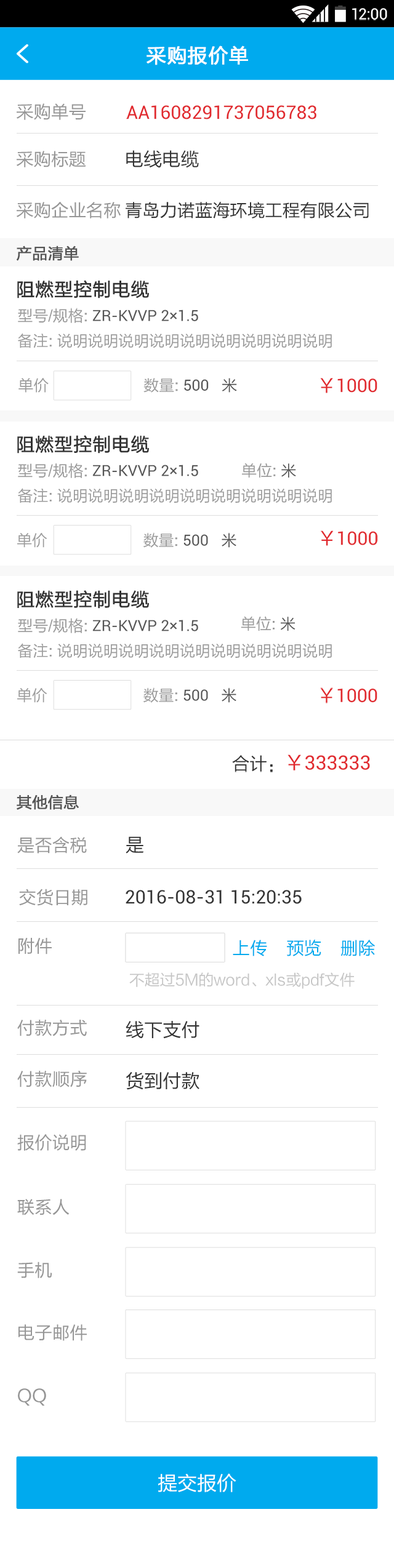
<style>
.page{position:relative;width:394px;height:1568px;background:#ffffff}
.page>*{position:absolute;margin:0}
.t1{font:15.3px "Roboto-Regular";color:#ffffff}
.t2{font:19.7px "FZLTHJW--GB1-0";letter-spacing:0.02em;color:#ffffff;font-weight:bold}
.t3{font:17.5px "FZLTHJW--GB1-0";color:#969696}
.t4{font:18.6px "Roboto-Regular";color:#e1292e}
.t5{font:18.6px "FZLTHK--GBK1-0";color:#333333}
.t6{font:17.5px "FZLTHK--GBK1-0";color:#333333}
.t7{font:15.3px "FZLTHJW--GB1-0";color:#555555;font-weight:bold}
.t8{font:18.6px "FZLTHJW--GB1-0";color:#333333;font-weight:bold}
.t9{font:15.3px "Roboto-Regular";color:#555555}
.t10{font:15.3px "FZLTHJW--GB1-0";color:#9b9b9b}
.t11{font:15.3px "FZLTHJW--GB1-0";color:#555555}
.t12{font:18.6px "FZLTHJW--GB1-0";color:#e1292e}
.t13{font:19.7px "Roboto-Regular";color:#e1292e}
.t14{font:17.5px "FZLTHJW--GB1-0";color:#333333}
.t15{font:19.7px "FZLTHJW--GB1-0";color:#e1292e}
.t16{font:18.6px "Roboto-Regular";color:#333333}
.t17{font:17.5px "FZLTHJW--GB1-0";color:#00aaee}
.t18{font:15.3px "FZLTHJW--GB1-0";color:#c6c6c6}
.t19{font:19.7px "FZLTHJW--GB1-0";color:#ffffff}
</style>
<div class="page">
<p class="t1" style="left:352px;top:8px;width:35px;height:12px">12:00</p>
<p class="t2" style="left:146px;top:46px;width:102px;height:19px">采购报价单</p>
<p class="t3" style="left:17px;top:103px;width:69px;height:17px">采购单号</p>
<p class="t4" style="left:126px;top:105px;width:190px;height:14px">AA1608291737056783</p>
<p class="t3" style="left:17px;top:151px;width:69px;height:16px">采购标题</p>
<p class="t5" style="left:126px;top:150px;width:73px;height:18px">电线电缆</p>
<p class="t3" style="left:17px;top:202px;width:104px;height:16px">采购企业名称</p>
<p class="t6" style="left:126px;top:202px;width:243px;height:16px">青岛力诺蓝海环境工程有限公司</p>
<p class="t7" style="left:17px;top:246px;width:62px;height:15px">产品清单</p>
<p class="t8" style="left:17px;top:280px;width:132px;height:18px">阻燃型控制电缆</p>
<p class="t9" style="left:18px;top:308px;width:180px;height:15px"><span class="t10">型号/规格: </span>ZR-KVVP 2×1.5</p>
<p class="t10" style="left:18px;top:333px;width:314px;height:15px">备注: 说明说明说明说明说明说明说明说明说明</p>
<p class="t10" style="left:18px;top:378px;width:31px;height:15px">单价</p>
<p class="t10" style="left:143px;top:378px;width:94px;height:15px">数量: <span class="t9">500</span><span class="t11">   米</span></p>
<p class="t4" style="left:320px;top:378px;width:57px;height:15px"><span class="t12">￥</span>1000</p>
<p class="t8" style="left:17px;top:435px;width:132px;height:19px">阻燃型控制电缆</p>
<p class="t9" style="left:18px;top:463px;width:180px;height:15px"><span class="t10">型号/规格: </span>ZR-KVVP 2×1.5</p>
<p class="t10" style="left:242px;top:463px;width:54px;height:15px">单位: <span class="t11">米</span></p>
<p class="t10" style="left:18px;top:488px;width:314px;height:15px">备注: 说明说明说明说明说明说明说明说明说明</p>
<p class="t10" style="left:17px;top:533px;width:30px;height:15px">单价</p>
<p class="t10" style="left:143px;top:532px;width:93px;height:16px">数量: <span class="t9">500</span><span class="t11">   米</span></p>
<p class="t4" style="left:320px;top:530px;width:58px;height:16px"><span class="t12">￥</span>1000</p>
<p class="t8" style="left:17px;top:590px;width:132px;height:19px">阻燃型控制电缆</p>
<p class="t9" style="left:18px;top:618px;width:180px;height:15px"><span class="t10">型号/规格: </span>ZR-KVVP 2×1.5</p>
<p class="t10" style="left:241px;top:616px;width:54px;height:15px">单位: <span class="t11">米</span></p>
<p class="t10" style="left:18px;top:643px;width:314px;height:15px">备注: 说明说明说明说明说明说明说明说明说明</p>
<p class="t10" style="left:17px;top:688px;width:30px;height:15px">单价</p>
<p class="t10" style="left:143px;top:687px;width:93px;height:16px">数量: <span class="t9">500</span><span class="t11">   米</span></p>
<p class="t4" style="left:320px;top:687px;width:57px;height:16px"><span class="t12">￥</span>1000</p>
<p class="t13" style="left:232px;top:754px;width:138px;height:18px"><span class="t14">合计：</span><span class="t15">￥</span>333333</p>
<p class="t7" style="left:17px;top:794px;width:62px;height:16px">其他信息</p>
<p class="t3" style="left:17px;top:836px;width:70px;height:18px">是否含税</p>
<p class="t5" style="left:126px;top:836px;width:18px;height:18px">是</p>
<p class="t3" style="left:19px;top:889px;width:68px;height:17px">交货日期</p>
<p class="t16" style="left:126px;top:890px;width:176px;height:14px">2016-08-31 15:20:35</p>
<p class="t3" style="left:18px;top:938px;width:34px;height:16px">附件</p>
<p class="t17" style="left:233px;top:940px;width:34px;height:16px">上传</p>
<p class="t17" style="left:287px;top:940px;width:34px;height:16px">预览</p>
<p class="t17" style="left:340px;top:940px;width:35px;height:16px">删除</p>
<p class="t18" style="left:129px;top:972px;width:225px;height:17px">不超过5M的word、xls或pdf文件</p>
<p class="t3" style="left:17px;top:1020px;width:70px;height:16px">付款方式</p>
<p class="t5" style="left:126px;top:1021px;width:73px;height:18px">线下支付</p>
<p class="t3" style="left:17px;top:1070px;width:70px;height:17px">付款顺序</p>
<p class="t5" style="left:126px;top:1071px;width:73px;height:19px">货到付款</p>
<p class="t3" style="left:17px;top:1134px;width:69px;height:17px">报价说明</p>
<p class="t3" style="left:17px;top:1199px;width:53px;height:16px">联系人</p>
<p class="t3" style="left:17px;top:1262px;width:35px;height:16px">手机</p>
<p class="t3" style="left:18px;top:1324px;width:69px;height:17px">电子邮件</p>
<p class="t3" style="left:18px;top:1388px;width:28px;height:18px">QQ</p>
<p class="t19" style="left:158px;top:1473px;width:78px;height:19px">提交报价</p>
</div>
